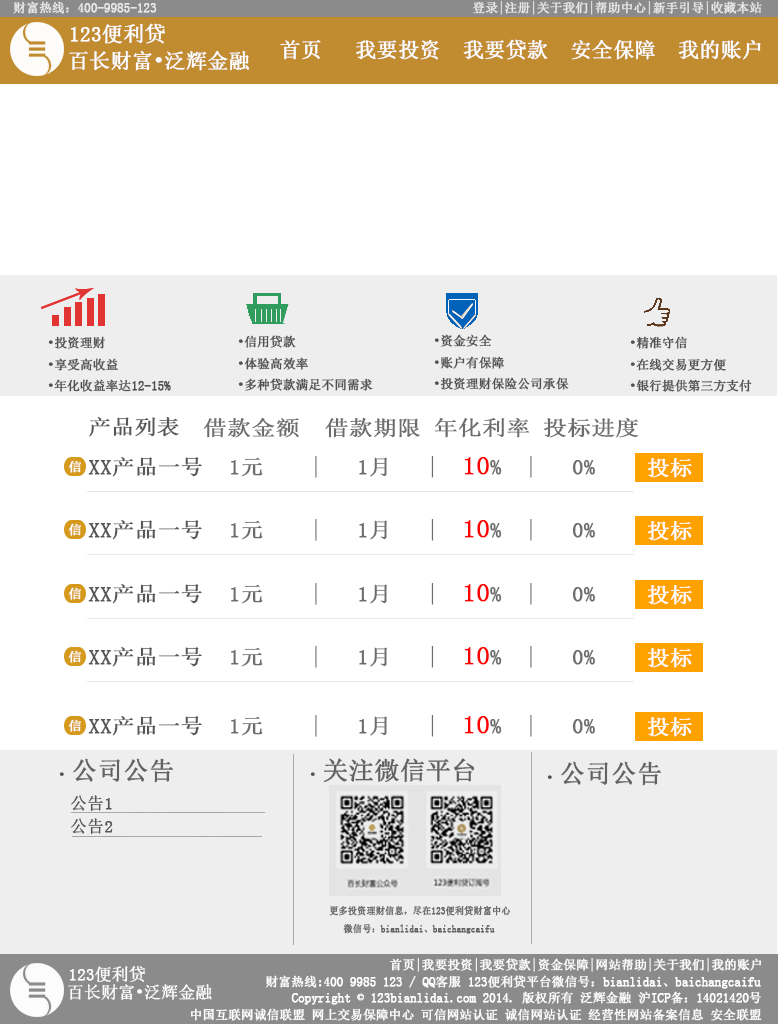
<style>
.page{position:relative;width:778px;height:1024px;background:#ffffff}
.page>*{position:absolute;margin:0}
.t1{font:12.5px "SimSun";color:#e8e8e8;font-weight:bold}
.t2{font:20.8px "SimSun";color:#ffffff;font-weight:bold}
.t3{font:12.5px "SimSun";color:#505050;font-weight:bold}
.t4{font:20.8px "SimSun";color:#565656;font-weight:bold;scale:1.07 1}
.t5{font:20.8px "SimSun";color:#6d6d6d;font-weight:bold;scale:1.13 1}
.t6{font:12.5px "SimSun";color:#ffffff;font-weight:bold;scale:1.07 1}
.t7{font:20.8px "SimSun";color:#6d6d6d;font-weight:bold;scale:1.07 1}
.t8{font:25px "SimSun";color:#ff0000;font-weight:bold;scale:1.07 1}
.t9{font:20.8px "SimSun";color:#ffffff;font-weight:bold;scale:1.07 1}
.t10{font:25px "SimSun";color:#626262;font-weight:bold}
.t11{font:16.7px "SimSun";color:#565656;font-weight:bold}
.t12{font:9.8px "SimSun";color:#626262;font-weight:bold;scale:0.92 1}
.t13{font:16.7px "SimSun";color:#ffffff;font-weight:bold}
.t14{font:12.5px "SimSun";color:#ffffff;font-weight:bold}
</style>
<div class="page">
<p class="t1" style="left:13px;top:1px;width:144px;height:13px">财富热线：400-9985-123</p>
<p class="t1" style="left:473px;top:1px;width:289px;height:14px">登录|注册|关于我们|帮助中心|新手引导|收藏本站</p>
<p class="t2" style="left:71px;top:23px;width:94px;height:21px">123便利贷</p>
<p class="t2" style="left:280px;top:39px;width:481px;height:21px">首页   我要投资  我要贷款  安全保障  我的账户</p>
<p class="t2" style="left:69px;top:50px;width:180px;height:21px">百长财富•泛辉金融</p>
<p class="t3" style="left:48px;top:336px;width:123px;height:56px">•投资理财<br>•享受高收益<br>•年化收益率达12-15%</p>
<p class="t3" style="left:238px;top:335px;width:135px;height:56px">•信用贷款<br>•体验高效率<br>•多种贷款满足不同需求</p>
<p class="t3" style="left:434px;top:334px;width:135px;height:56px">•资金安全<br>•账户有保障<br>•投资理财保险公司承保</p>
<p class="t3" style="left:630px;top:336px;width:122px;height:56px">•精准守信<br>•在线交易更方便<br>•银行提供第三方支付</p>
<p class="t4" style="left:89px;top:417px;width:90px;height:20px">产品列表</p>
<p class="t5" style="left:203px;top:417px;width:436px;height:21px">借款金额  借款期限 年化利率 投标进度</p>
<p class="t6" style="left:68px;top:460px;width:14px;height:13px">信</p>
<p class="t4" style="left:88px;top:457px;width:114px;height:20px">XX产品一号</p>
<p class="t7" style="left:231px;top:456px;width:364px;height:22px">1元    |   1月   |  <span class="t8">10</span>%  |   0%</p>
<p class="t9" style="left:648px;top:458px;width:44px;height:20px">投标</p>
<p class="t4" style="left:88px;top:520px;width:114px;height:20px">XX产品一号</p>
<p class="t7" style="left:231px;top:519px;width:364px;height:22px">1元    |   1月   |  <span class="t8">10</span>%  |   0%</p>
<p class="t9" style="left:648px;top:521px;width:44px;height:20px">投标</p>
<p class="t6" style="left:68px;top:523px;width:14px;height:13px">信</p>
<p class="t6" style="left:68px;top:587px;width:14px;height:13px">信</p>
<p class="t4" style="left:88px;top:584px;width:114px;height:20px">XX产品一号</p>
<p class="t7" style="left:231px;top:583px;width:364px;height:22px">1元    |   1月   |  <span class="t8">10</span>%  |   0%</p>
<p class="t9" style="left:648px;top:585px;width:44px;height:20px">投标</p>
<p class="t6" style="left:68px;top:650px;width:14px;height:13px">信</p>
<p class="t4" style="left:88px;top:647px;width:114px;height:20px">XX产品一号</p>
<p class="t7" style="left:231px;top:646px;width:364px;height:22px">1元    |   1月   |  <span class="t8">10</span>%  |   0%</p>
<p class="t9" style="left:648px;top:648px;width:44px;height:20px">投标</p>
<p class="t6" style="left:68px;top:719px;width:14px;height:13px">信</p>
<p class="t4" style="left:88px;top:716px;width:114px;height:20px">XX产品一号</p>
<p class="t7" style="left:231px;top:715px;width:364px;height:22px">1元    |   1月   |  <span class="t8">10</span>%  |   0%</p>
<p class="t9" style="left:648px;top:717px;width:44px;height:20px">投标</p>
<p class="t10" style="left:59px;top:758px;width:114px;height:25px"><span class="t3">• </span>公司公告</p>
<p class="t10" style="left:310px;top:758px;width:165px;height:25px"><span class="t3">• </span>关注微信平台</p>
<p class="t10" style="left:547px;top:761px;width:114px;height:25px"><span class="t3">• </span>公司公告</p>
<p class="t11" style="left:71px;top:795px;width:41px;height:16px">公告1</p>
<p class="t11" style="left:71px;top:818px;width:42px;height:16px">公告2</p>
<p class="t12" style="left:329px;top:905px;width:181px;height:29px">更多投资理财信息，尽在123便利贷财富中心<br>   微信号：bianlidai、baichangcaifu</p>
<p class="t13" style="left:70px;top:966px;width:75px;height:17px">123便利贷</p>
<p class="t14" style="left:389px;top:958px;width:373px;height:14px">首页|我要投资|我要贷款|资金保障|网站帮助|关于我们|我的账户</p>
<p class="t14" style="left:266px;top:975px;width:495px;height:14px">财富热线:400 9985 123 / QQ客服 123便利贷平台微信号：bianlidai、baichangcaifu</p>
<p class="t13" style="left:68px;top:984px;width:144px;height:16px">百长财富•泛辉金融</p>
<p class="t14" style="left:291px;top:991px;width:470px;height:14px">Copyright © 123bianlidai.com 2014. 版权所有 泛辉金融 沪ICP备：14021420号</p>
<p class="t14" style="left:191px;top:1008px;width:571px;height:13px">中国互联网诚信联盟 网上交易保障中心 可信网站认证 诚信网站认证 经营性网站备案信息 安全联盟</p>
</div>
